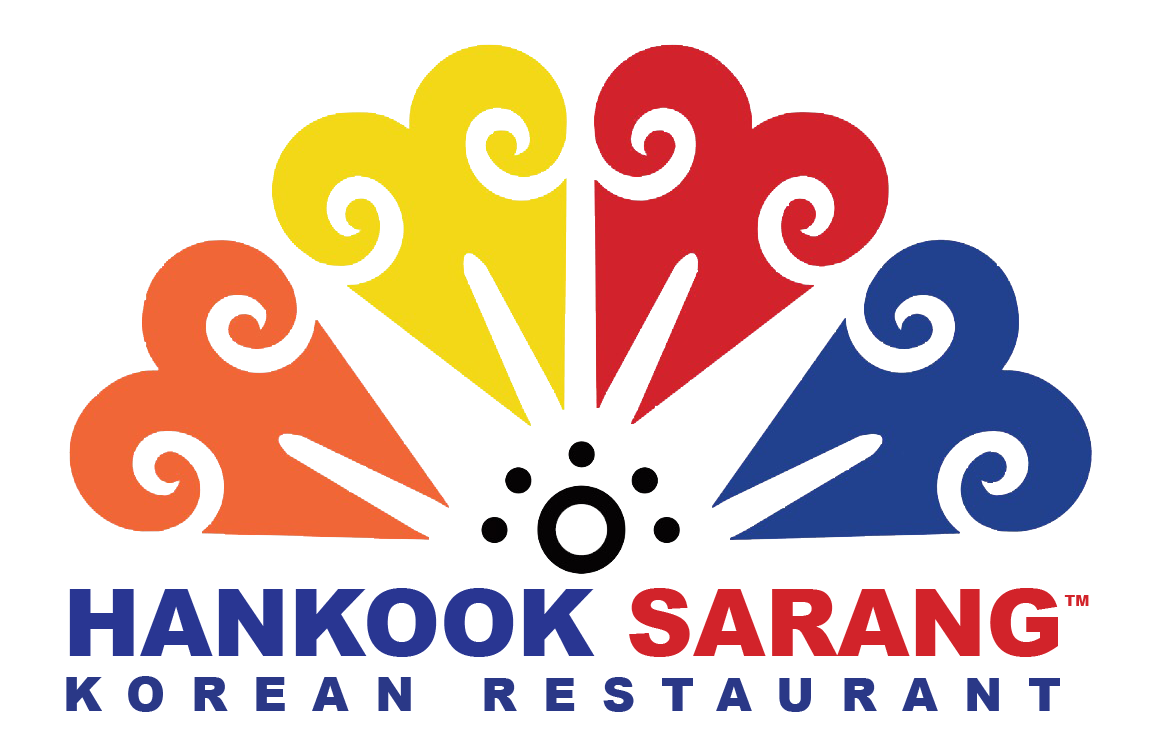
<style>
.page{position:relative;width:1159px;height:755px;background:#ffffff}
.page>*{position:absolute;margin:0}
.t1{font:92.7px "Arial-Black";color:#293692;text-transform:uppercase}
.t2{font:92.6px "Arial-Black";color:#d2232a;text-transform:uppercase}
.t3{font:14.9px "Arial-Black";color:#d2232a;text-transform:uppercase}
.t4{font:46.9px "Arial-Black";letter-spacing:0.55em;color:#2a3887;text-transform:uppercase}
.t5{font:46.4px "Arial-Black";letter-spacing:0.55em;color:#2a3887;text-transform:uppercase}
</style>
<div class="page">
<p class="t1" style="left:69px;top:588px;width:526px;height:69px">hankook</p>
<p class="t2" style="left:629px;top:588px;width:429px;height:69px">sarang</p>
<p class="t3" style="left:1064px;top:595px;width:25px;height:11px">tm</p>
<p class="t4" style="left:66px;top:676px;width:345px;height:36px">korean</p>
<p class="t5" style="left:484px;top:677px;width:576px;height:35px">restaurant</p>
</div>
